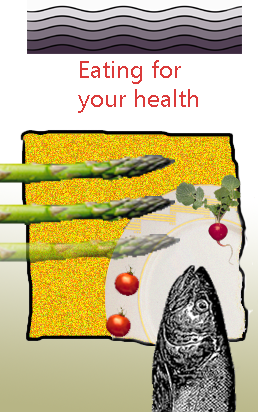
<style>
.page{position:relative;width:258px;height:412px;background:#ffffff}
.page>*{position:absolute;margin:0}
.t1{font:24px "MyanmarText";color:#db3a3a}
.t2{font:24px "CourierNewPSMT";color:#000000}
</style>
<div class="page">
<p class="t1" style="left:78px;top:60px;width:120px;height:53px"><span class="t2">    </span>Eating for<br>        your health</p>
</div>
